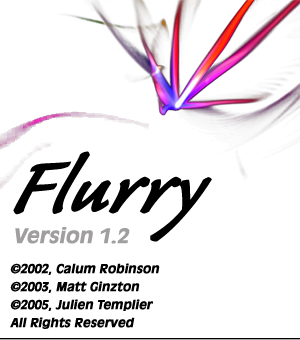
<style>
.page{position:relative;width:300px;height:340px;background:#ffffff}
.page>*{position:absolute;margin:0}
.t1{font:94px "CalibanStd";color:#000000;font-weight:bold;font-style:italic}
.t2{font:20px "AntiqueOliveStd-Bold";color:#a09e9e;font-weight:bold;font-style:italic}
.t3{font:12px/18px "AntiqueOliveStd-Bold";color:#000000;font-weight:bold;font-style:italic}
</style>
<div class="page">
<p class="t1" style="left:13px;top:151px;width:199px;height:91px">Flurry</p>
<p class="t2" style="left:15px;top:227px;width:115px;height:17px">Version 1.2</p>
<p class="t3" style="left:10px;top:263px;width:150px;height:66px">©2002, Calum Robinson<br>©2003, Matt Ginzton<br>©2005, Julien Templier<br>All Rights Reserved</p>
</div>
